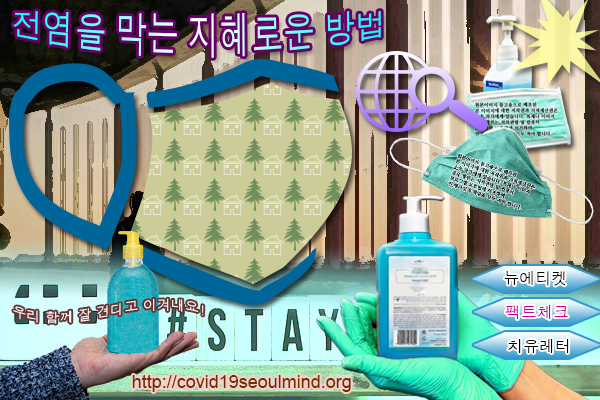
<style>
.page{position:relative;width:600px;height:400px}
.page>*{position:absolute;margin:0}
.t1{font:28.1px "Dotum";scale:1.13 1}
.t2{font:16px "Dotum";color:#000000}
.t3{font:14px/4px "Dotum";color:#ffffff}
.t4{font:16px "Dotum";color:#cc0099}
.t5{font:18px "ArialMT";color:#663300}
</style>
<div class="page">
<p class="t1" style="left:13px;top:11px;width:368px;height:47px">전염을 막는 지혜로운 방법</p>
<p class="t2" style="left:504px;top:271px;width:62px;height:15px">뉴에티켓</p>
<p class="t3" style="left:13px;top:298px;width:191px;height:26px;text-align:center">우리 함께 잘 견디고 이겨내요!</p>
<p class="t4" style="left:505px;top:305px;width:63px;height:14px">팩트체크</p>
<p class="t2" style="left:508px;top:339px;width:61px;height:14px">치유레터</p>
<p class="t5" style="left:132px;top:375px;width:219px;height:17px">http://covid19seoulmind.org</p>
</div>
